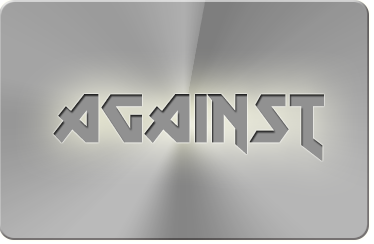
<style>
.page{position:relative;width:374px;height:244px}
.page>*{position:absolute;margin:0}
.t1{font:68px "MetalLord-Regular";color:#919191;text-transform:uppercase}
</style>
<div class="page">
<p class="t1" style="left:53px;top:94px;width:271px;height:67px">against</p>
<p class="t1" style="left:53px;top:94px;width:271px;height:67px">against</p>
</div>
